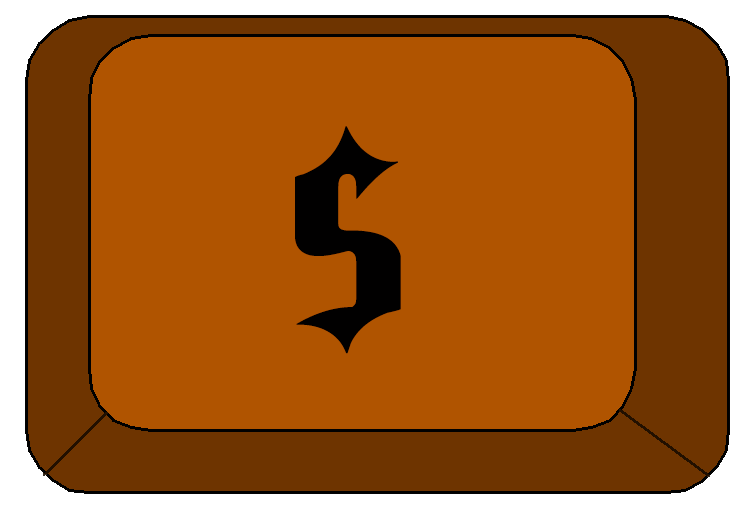
<style>
.page{position:relative;width:740px;height:508px;background:#b05400}
.page>*{position:absolute;margin:0}
.t1{font:288px "NightmareHero";color:#010000}
</style>
<div class="page">
<p class="t1" style="left:295px;top:126px;width:106px;height:228px">5</p>
</div>
